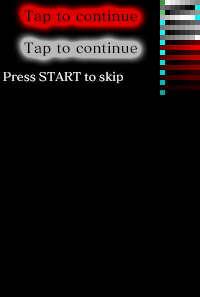
<style>
.page{position:relative;width:200px;height:297px;background:#000000}
.page>*{position:absolute;margin:0}
.t1{font:14px "MatisseVPro-DB";letter-spacing:0.01em;color:#000000}
.t2{font:12px "MatisseVPro-DB";color:#ffffff}
</style>
<div class="page">
<p class="t1" style="left:24px;top:10px;width:113px;height:14px">Tap to continue</p>
<p class="t1" style="left:24px;top:42px;width:113px;height:14px">Tap to continue</p>
<p class="t2" style="left:3px;top:71px;width:120px;height:13px">Press START to skip</p>
</div>
